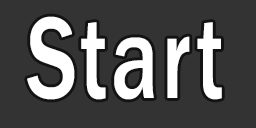
<style>
.page{position:relative;width:256px;height:128px;background:#333333}
.page>*{position:absolute;margin:0}
.t1{font:120px "FranklinGothic-Medium";letter-spacing:0.04em;color:#ffffff;scale:0.72 1}
</style>
<div class="page">
<p class="t1" style="left:27px;top:16px;width:195px;height:84px">Start</p>
</div>
